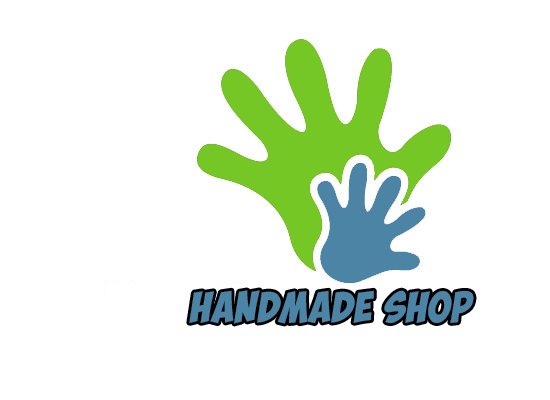
<style>
.page{position:relative;width:550px;height:400px;background:#ffffff}
.page>*{position:absolute;margin:0}
.t1{font:30.8px "ObelixPro";letter-spacing:0.025em;color:#4b84a5;font-style:italic;scale:0.91 1}
</style>
<div class="page">
<p class="t1" style="left:189px;top:290px;width:285px;height:34px">HANDMADE SHOP</p>
</div>
